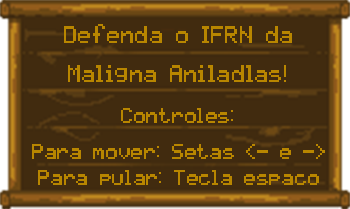
<style>
.page{position:relative;width:350px;height:209px;background:#412b0f}
.page>*{position:absolute;margin:0}
.t1{font:19.2px "pixelmix";color:#b88600}
.t2{font:17.2px "pixelmix";color:#b88600}
</style>
<div class="page">
<p class="t1" style="left:64px;top:24px;width:228px;height:19px">Defenda o IFRN da</p>
<p class="t1" style="left:68px;top:65px;width:218px;height:17px">Maligna Aniladlas!</p>
<p class="t2" style="left:121px;top:108px;width:112px;height:15px">Controles:</p>
<p class="t2" style="left:32px;top:144px;width:293px;height:15px">Para mover: Setas &lt;- e -&gt;</p>
<p class="t2" style="left:38px;top:170px;width:281px;height:15px">Para pular: Tecla espaco</p>
</div>
